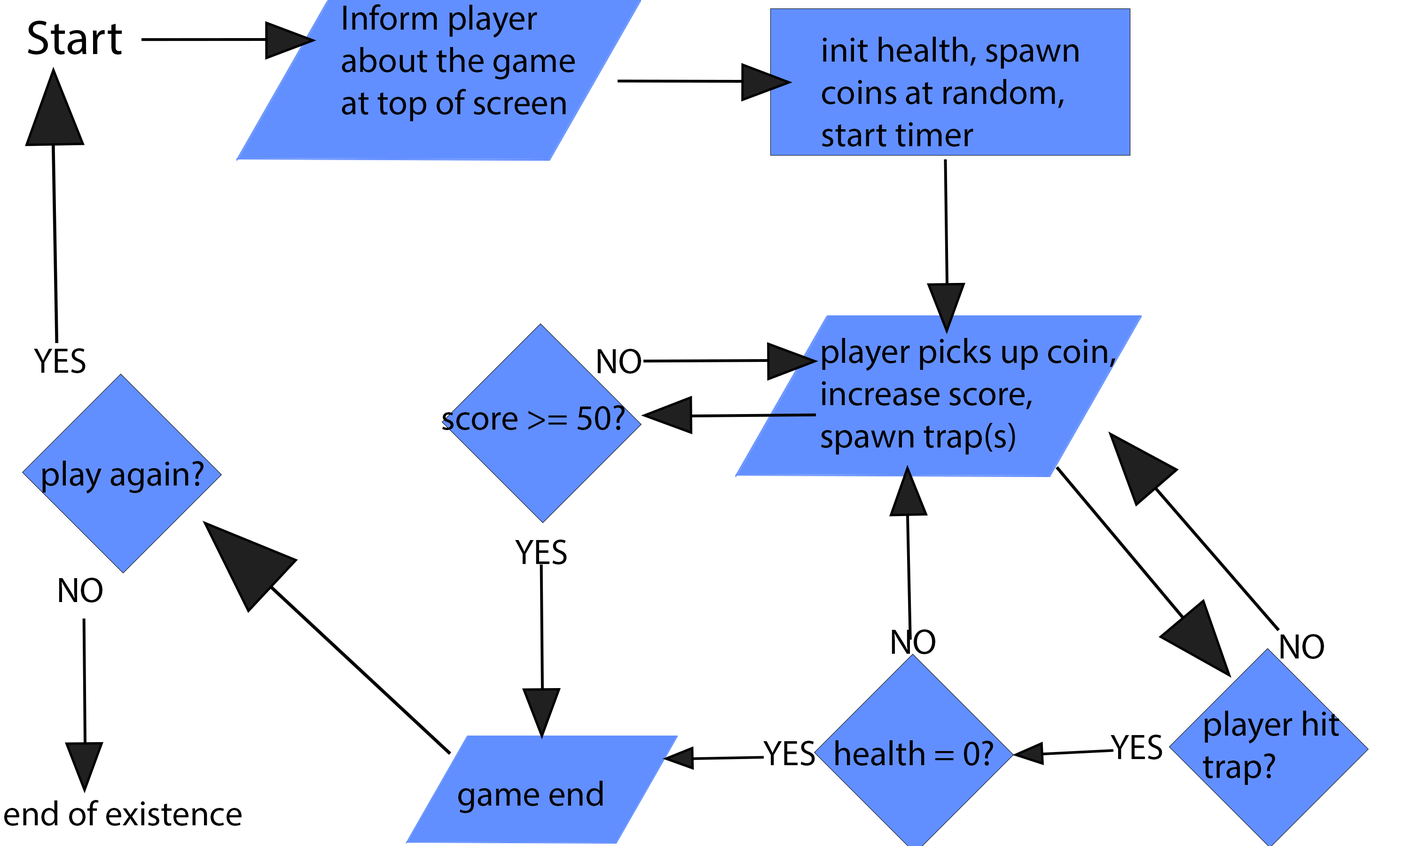
<style>
.page{position:relative;width:1410px;height:846px;background:#ffffff}
.page>*{position:absolute;margin:0}
.t1{font:35.2px "MyriadPro-Regular";color:#000000}
.t2{font:48.9px "MyriadPro-Regular";color:#000000}
</style>
<div class="page">
<p class="t1" style="left:342px;top:4px;width:233px;height:117px">Inform player<br>about the game <br>at top of screen</p>
<p class="t2" style="left:28px;top:21px;width:94px;height:34px">Start</p>
<p class="t1" style="left:822px;top:37px;width:256px;height:110px">init health, spawn<br>coins at random,<br>start timer</p>
<p class="t1" style="left:821px;top:338px;width:294px;height:116px">player picks up coin,<br>increase score,<br>spawn trap(s)</p>
<p class="t1" style="left:34px;top:348px;width:52px;height:25px">YES</p>
<p class="t1" style="left:597px;top:349px;width:44px;height:25px">NO</p>
<p class="t1" style="left:442px;top:405px;width:183px;height:25px">score &gt;= 50?</p>
<p class="t1" style="left:42px;top:461px;width:161px;height:32px">play again?</p>
<p class="t1" style="left:515px;top:539px;width:52px;height:25px">YES</p>
<p class="t1" style="left:59px;top:578px;width:43px;height:24px">NO</p>
<p class="t1" style="left:891px;top:629px;width:44px;height:25px">NO</p>
<p class="t1" style="left:1280px;top:634px;width:44px;height:25px">NO</p>
<p class="t1" style="left:1203px;top:711px;width:136px;height:74px">player hit<br>trap?</p>
<p class="t1" style="left:1110px;top:734px;width:52px;height:25px">YES</p>
<p class="t1" style="left:763px;top:741px;width:52px;height:24px">YES</p>
<p class="t1" style="left:835px;top:740px;width:158px;height:25px">health = 0?</p>
<p class="t1" style="left:458px;top:781px;width:145px;height:32px">game end</p>
<p class="t1" style="left:4px;top:800px;width:238px;height:26px">end of existence</p>
</div>
